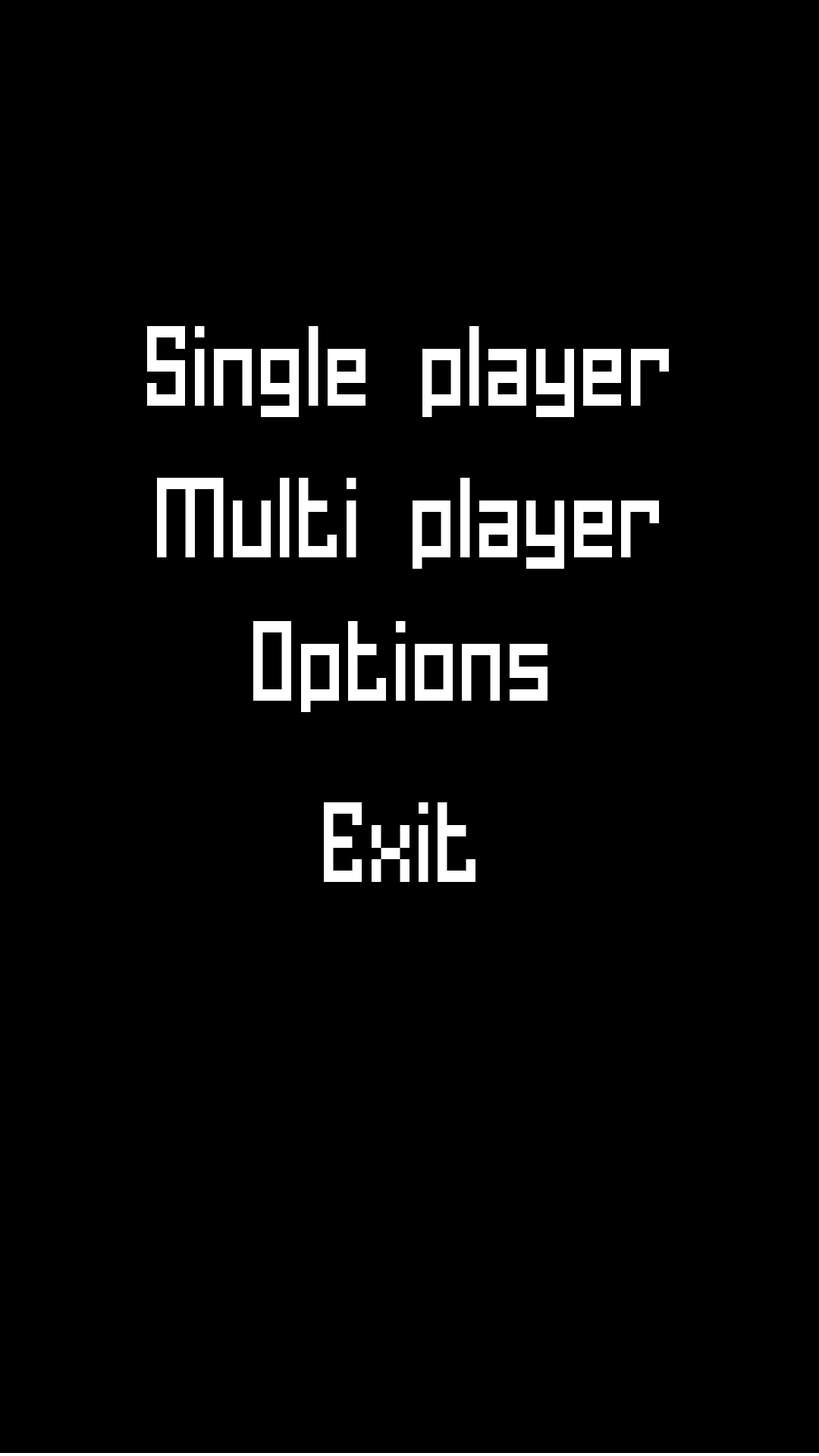
<style>
.page{position:relative;width:819px;height:1456px;background:#000000}
.page>*{position:absolute;margin:0}
.t1{font:121.3px "Homespun BRK";color:#ffffff}
</style>
<div class="page">
<p class="t1" style="left:147px;top:326px;width:522px;height:91px">Single player</p>
<p class="t1" style="left:157px;top:478px;width:502px;height:91px">Multi player</p>
<p class="t1" style="left:253px;top:621px;width:295px;height:91px">Options</p>
<p class="t1" style="left:324px;top:802px;width:151px;height:80px">Exit</p>
</div>
